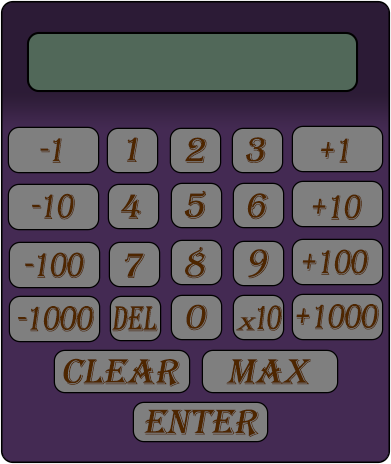
<style>
.page{position:relative;width:391px;height:464px;background:#7f7f7f}
.page>*{position:absolute;margin:0}
.t1{font:36.9px "Algerian";color:#4e2700;font-style:italic}
.t2{font:36.9px "Algerian";letter-spacing:-0.04em;color:#4e2700;font-style:italic;scale:0.82 1}
.t3{font:36.9px "Algerian";letter-spacing:-0.1em;color:#4e2700;font-style:italic;scale:0.71 1}
.t4{font:19.6px "Algerian";letter-spacing:-0.1em;color:#4e2700;font-style:italic;scale:1.34 1}
.t5{font:36.9px "Algerian";color:#4e2700;font-style:italic;scale:0.69 1}
</style>
<div class="page">
<p class="t1" style="left:126px;top:137px;width:12px;height:25px">1</p>
<p class="t1" style="left:185px;top:137px;width:22px;height:26px">2</p>
<p class="t1" style="left:246px;top:137px;width:20px;height:26px">3</p>
<p class="t2" style="left:40px;top:138px;width:22px;height:25px">-1</p>
<p class="t2" style="left:321px;top:138px;width:28px;height:25px">+1</p>
<p class="t2" style="left:32px;top:193px;width:43px;height:27px">-10</p>
<p class="t1" style="left:121px;top:194px;width:21px;height:25px">4</p>
<p class="t1" style="left:184px;top:190px;width:22px;height:29px">5</p>
<p class="t1" style="left:247px;top:193px;width:22px;height:27px">6</p>
<p class="t2" style="left:312px;top:194px;width:50px;height:26px">+10</p>
<p class="t2" style="left:25px;top:252px;width:60px;height:27px">-100</p>
<p class="t1" style="left:124px;top:253px;width:21px;height:25px">7</p>
<p class="t1" style="left:185px;top:247px;width:21px;height:32px">8</p>
<p class="t1" style="left:248px;top:249px;width:21px;height:30px">9</p>
<p class="t2" style="left:302px;top:249px;width:67px;height:26px">+100</p>
<p class="t1" style="left:186px;top:304px;width:22px;height:27px">0</p>
<p class="t3" style="left:236px;top:305px;width:46px;height:26px"><span class="t4">x</span>10</p>
<p class="t2" style="left:296px;top:304px;width:83px;height:26px">+1000</p>
<p class="t2" style="left:18px;top:306px;width:76px;height:26px">-1000</p>
<p class="t5" style="left:112px;top:306px;width:46px;height:26px">del</p>
<p class="t1" style="left:63px;top:358px;width:117px;height:29px">clear</p>
<p class="t1" style="left:226px;top:359px;width:85px;height:26px">max</p>
<p class="t1" style="left:144px;top:409px;width:115px;height:29px">enter</p>
</div>
